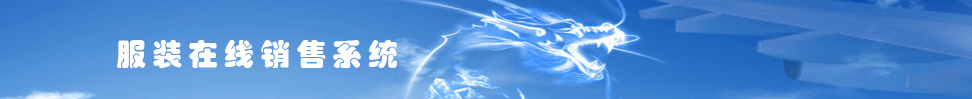
<style>
.page{position:relative;width:972px;height:99px}
.page>*{position:absolute;margin:0}
.t1{font:30px "STHupo";letter-spacing:0.2em;color:#ffffff}
</style>
<div class="page">
<p class="t1" style="left:117px;top:40px;width:281px;height:28px">服装在线销售系统</p>
</div>
